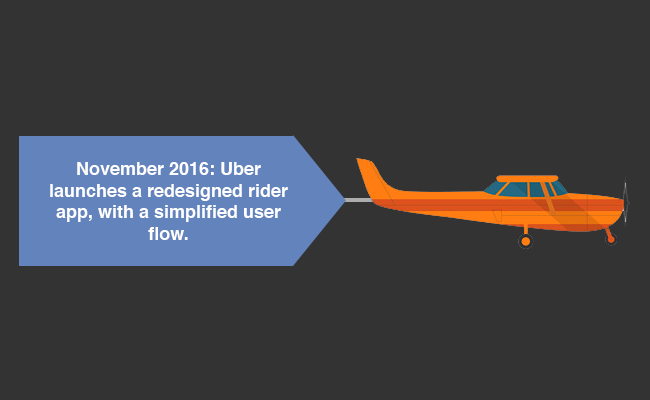
<style>
.page{position:relative;width:650px;height:400px;background:#333333}
.page>*{position:absolute;margin:0}
.t1{font:18px "Helvetica-Bold";color:#ffffff}
</style>
<div class="page">
<p class="t1" style="left:50px;top:162px;width:238px;height:78px;text-align:center">November 2016: Uber <br>launches a redesigned rider app, with a simplified user flow.</p>
</div>
